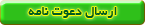
<style>
.page{position:relative;width:145px;height:25px}
.page>*{position:absolute;margin:0}
.t1{font:14px "BYekan";color:#005d21}
</style>
<div class="page">
<p class="t1" style="left:28px;top:7px;width:89px;height:11px">ارسال دعوت نامه</p>
</div>
